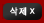
<style>
.page{position:relative;width:44px;height:23px;background:#990000}
.page>*{position:absolute;margin:0}
.t1{font:9px "YDIYGO330";letter-spacing:-0.075em;color:#ffffff;scale:0.9 1}
.t2{font:10px "YDIYGO330";letter-spacing:-0.075em;color:#ffffff;scale:0.9 1}
</style>
<div class="page">
<p class="t1" style="left:10px;top:7px;width:17px;height:9px">삭 제</p>
<p class="t2" style="left:29px;top:8px;width:6px;height:6px">x</p>
</div>
